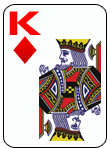
<style>
.page{position:relative;width:110px;height:150px;background:#fcfdfd}
.page>*{position:absolute;margin:0}
.t1{font:30px "UTM-Nokia";color:#ff0101}
</style>
<div class="page">
<p class="t1" style="left:9px;top:11px;width:32px;height:24px">K</p>
</div>
